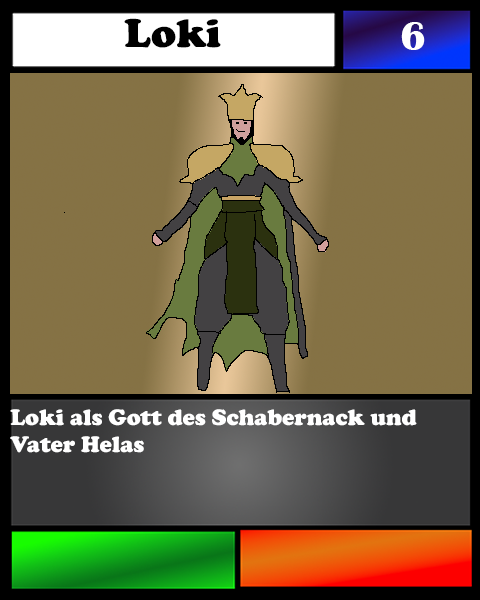
<style>
.page{position:relative;width:480px;height:600px}
.page>*{position:absolute;margin:0}
.t1{font:41.7px "CooperBlack";color:#000000}
.t2{font:41.7px "BritannicBold";color:#ffffff}
.t3{font:23.1px "CooperBlack";color:#ffffff}
</style>
<div class="page">
<p class="t1" style="left:124px;top:18px;width:97px;height:30px">Loki</p>
<p class="t2" style="left:401px;top:22px;width:24px;height:28px">6</p>
<p class="t3" style="left:10px;top:409px;width:407px;height:44px">Loki als Gott des Schabernack und <br>Vater Helas</p>
</div>
